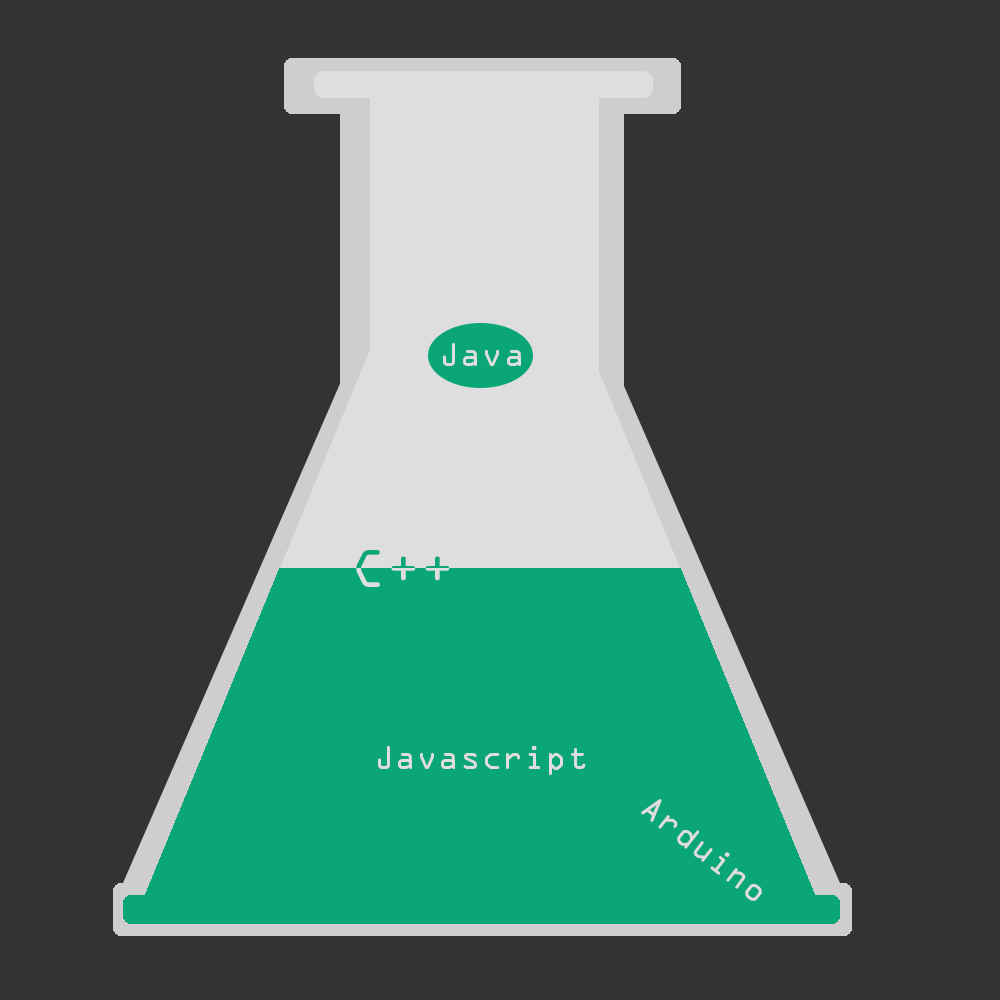
<style>
.page{position:relative;width:1000px;height:1000px;background:#333333}
.page>*{position:absolute;margin:0}
.t1{font:30px "OCRAStd";color:#dedede}
</style>
<div class="page">
<p class="t1" style="left:443px;top:343px;width:78px;height:23px">Java</p>
<p class="t1" style="left:378px;top:746px;width:208px;height:29px">Javascript</p>
<p class="t1" style="left:641px;top:799px;width:121px;height:102px;rotate:38deg">Arduino</p>
</div>
